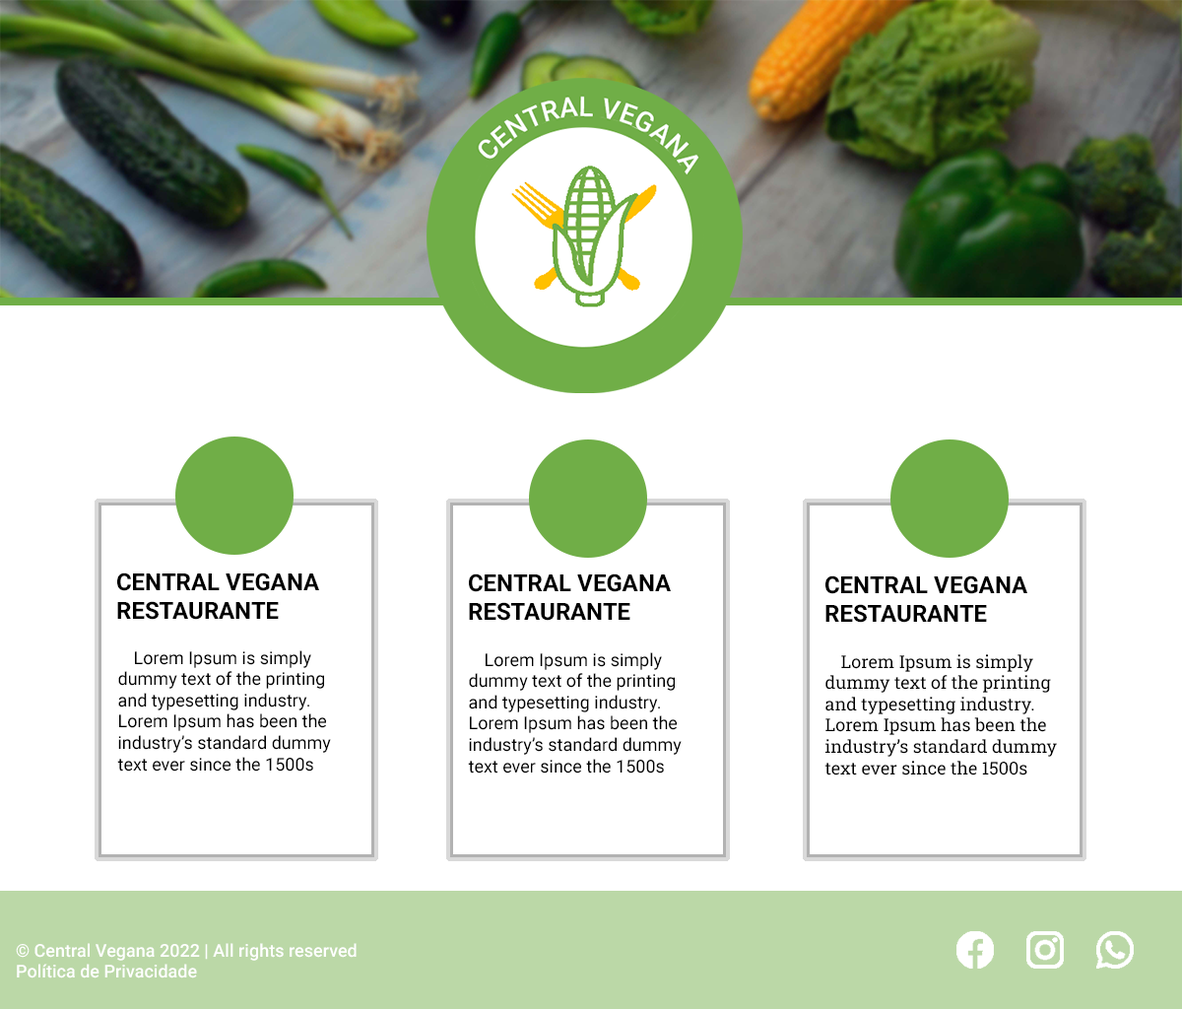
<style>
.page{position:relative;width:1182px;height:1009px;background:#ffffff}
.page>*{position:absolute;margin:0}
.t1{font:23.6px "Roboto-Bold";color:#000000}
.t2{font:17.7px "Roboto-Regular";color:#000000}
.t3{font:17.7px "RobotoSlab-Regular";color:#000000}
.t4{font:17.7px "Roboto-Medium";color:#ffffff}
</style>
<div class="page">
<p class="t1" style="left:117px;top:572px;width:202px;height:48px">CENTRAL VEGANA<br>RESTAURANTE</p>
<p class="t1" style="left:469px;top:573px;width:202px;height:48px">CENTRAL VEGANA<br>RESTAURANTE</p>
<p class="t1" style="left:826px;top:575px;width:201px;height:48px">CENTRAL VEGANA<br>RESTAURANTE</p>
<p class="t2" style="left:117px;top:650px;width:214px;height:121px">Lorem Ipsum is simply<br>dummy text of the printing <br>and typesetting industry. <br>Lorem Ipsum has been the <br>industry’s standard dummy <br>text ever since the 1500s</p>
<p class="t2" style="left:468px;top:652px;width:214px;height:121px">Lorem Ipsum is simply<br>dummy text of the printing <br>and typesetting industry. <br>Lorem Ipsum has been the <br>industry’s standard dummy <br>text ever since the 1500s</p>
<p class="t3" style="left:825px;top:654px;width:232px;height:121px">Lorem Ipsum is simply<br>dummy text of the printing <br>and typesetting industry. <br>Lorem Ipsum has been the <br>industry’s standard dummy <br>text ever since the 1500s</p>
<p class="t4" style="left:16px;top:943px;width:341px;height:35px">© Central Vegana 2022 | All rights reserved<br>Política de Privacidade</p>
</div>
